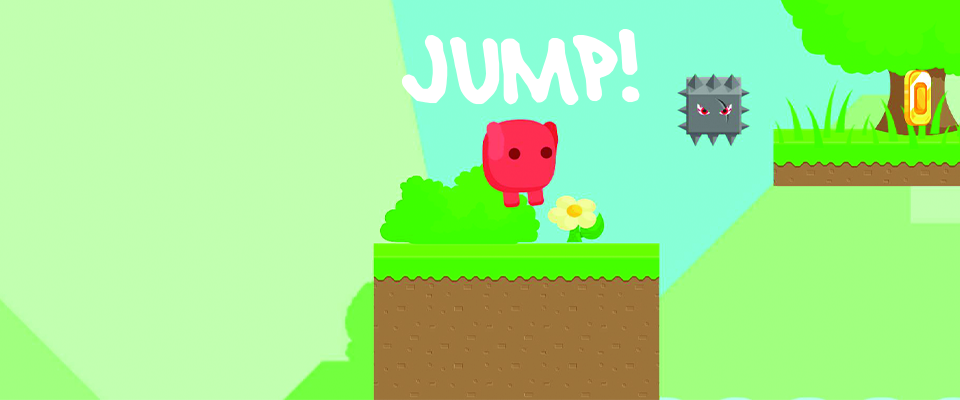
<style>
.page{position:relative;width:960px;height:400px;background:#c2ffb0}
.page>*{position:absolute;margin:0}
.t1{font:105.8px "HandMeDownS-BRK-";color:#ffffff}
</style>
<div class="page">
<p class="t1" style="left:401px;top:29px;width:239px;height:76px">JUMP!</p>
</div>
